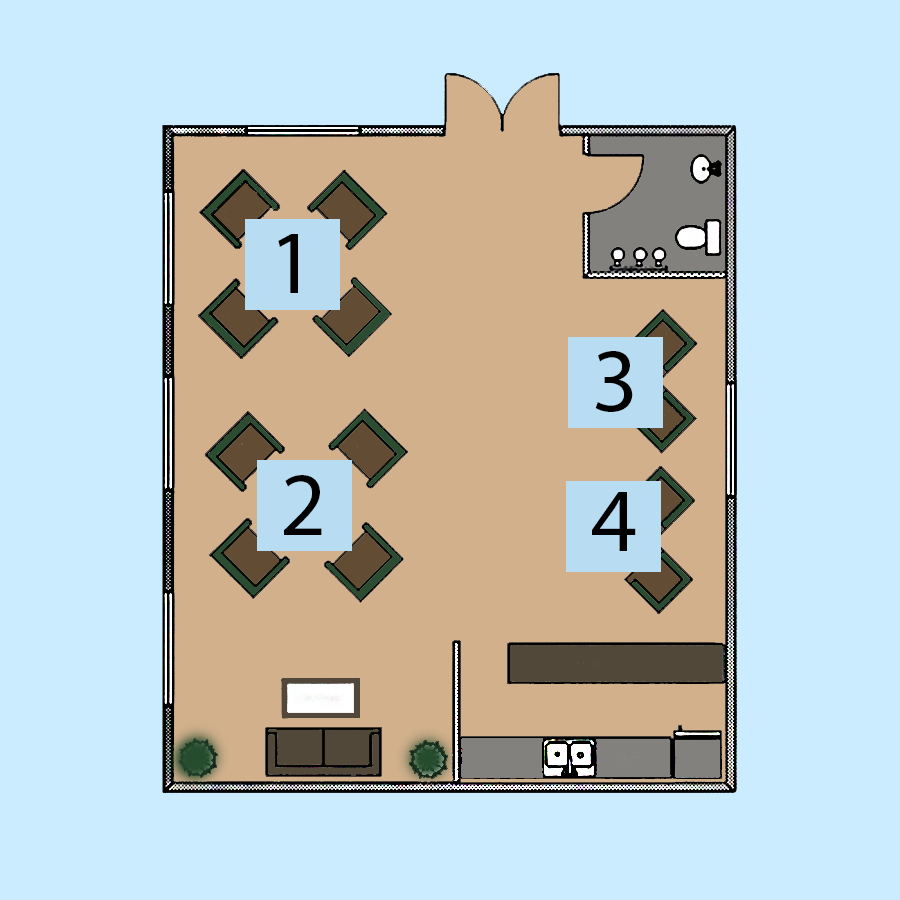
<style>
.page{position:relative;width:900px;height:900px;background:#cbecff}
.page>*{position:absolute;margin:0}
.t1{font:90px "MyriadPro-Regular";color:#000000}
</style>
<div class="page">
<p class="t1" style="left:278px;top:234px;width:20px;height:59px">1</p>
<p class="t1" style="left:595px;top:351px;width:38px;height:61px">3</p>
<p class="t1" style="left:284px;top:475px;width:38px;height:60px">2</p>
<p class="t1" style="left:592px;top:492px;width:44px;height:59px">4</p>
</div>
